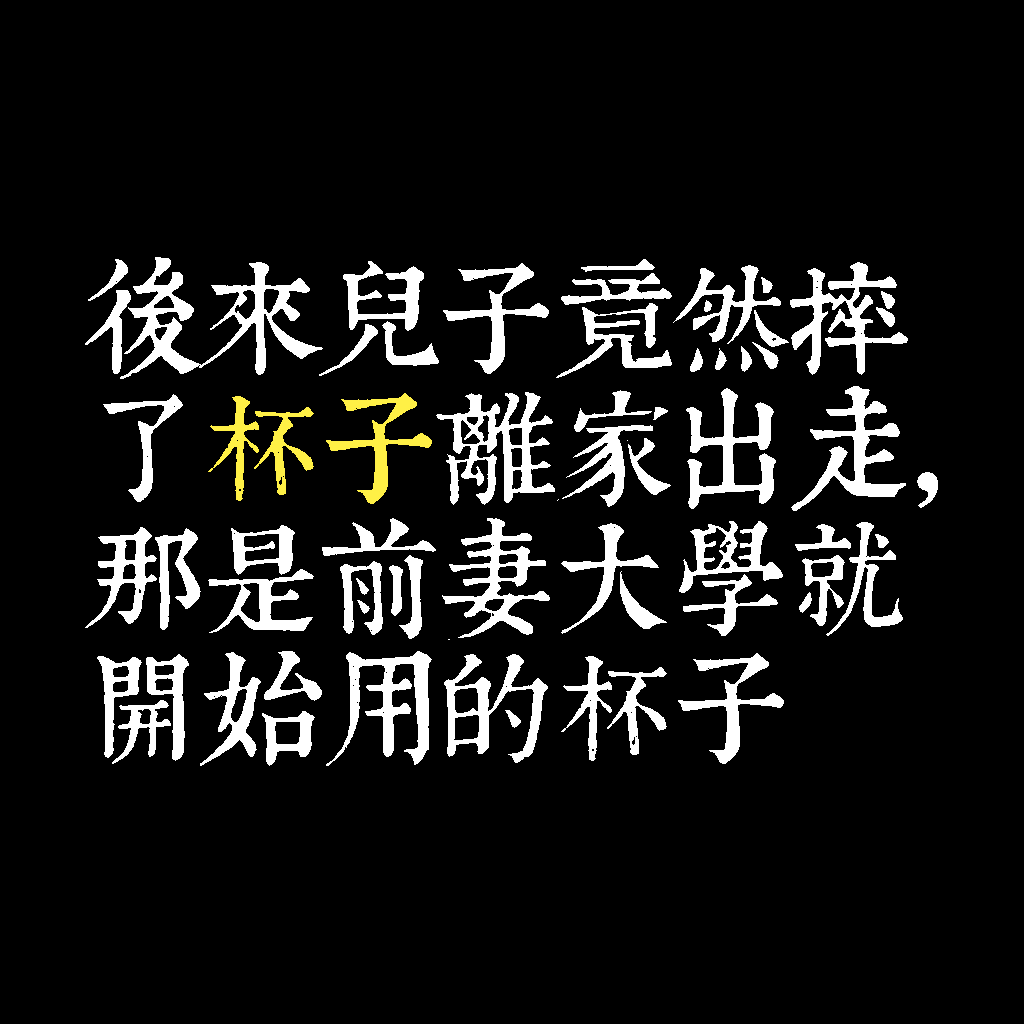
<style>
.page{position:relative;width:1024px;height:1024px;background:#000000}
.page>*{position:absolute;margin:0}
.t1{font:120px/130px "TpldKhangXiDictTrial";letter-spacing:-0.02em;color:#ffffff}
.t2{font:120px/130px "TpldKhangXiDictTrial";letter-spacing:-0.02em;color:#fff046}
</style>
<div class="page">
<p class="t1" style="left:85px;top:257px;width:853px;height:509px">後來兒子竟然摔<br>了<span class="t2">杯子</span>離家出走，<br>那是前妻大學就<br>開始用的杯子</p>
</div>
